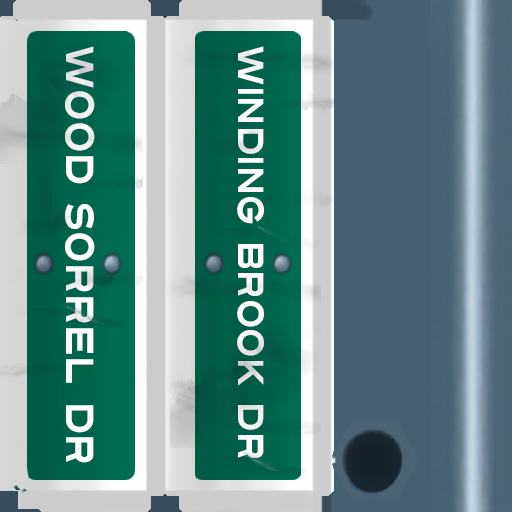
<style>
.page{position:relative;width:512px;height:512px}
.page>*{position:absolute;margin:0}
.t1{font:39px "Turnpike";color:#fefeff;scale:0.75 1}
.t2{font:36px "Turnpike";color:#fefeff;scale:0.75 1}
</style>
<div class="page">
<p class="t1" style="left:65px;top:46px;width:30px;height:417px;rotate:90deg">Wood Sorrel Dr</p>
<p class="t2" style="left:237px;top:46px;width:27px;height:412px;rotate:90deg">Winding Brook Dr</p>
</div>
